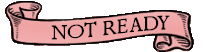
<style>
.page{position:relative;width:204px;height:52px;background:#ffffff}
.page>*{position:absolute;margin:0}
.t1{font:24px "Perpetua";color:#000000}
</style>
<div class="page">
<p class="t1" style="left:51px;top:15px;width:119px;height:25px">NOT READY</p>
</div>
